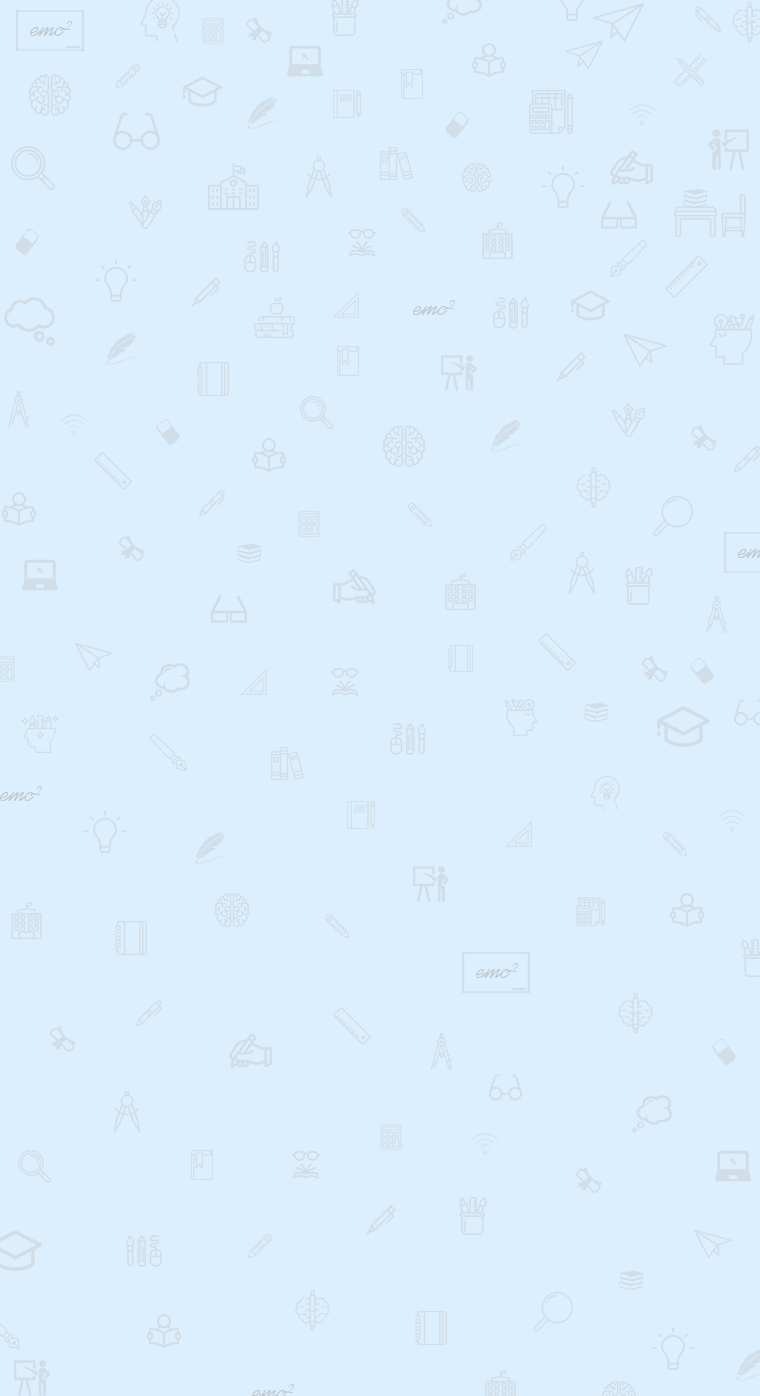
<style>
.page{position:relative;width:760px;height:1396px;background:#dbefff}
.page>*{position:absolute;margin:0}
.t1{font:26px "KaufmannBT-Regular";color:#bfc8cf}
</style>
<div class="page">
<p class="t1" style="left:30px;top:21px;width:42px;height:15px">emc²</p>
<p class="t1" style="left:413px;top:300px;width:42px;height:15px">emc²</p>
<p class="t1" style="left:0px;top:786px;width:42px;height:15px">emc²</p>
<p class="t1" style="left:476px;top:963px;width:42px;height:15px">emc²</p>
</div>
